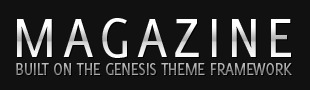
<style>
.page{position:relative;width:310px;height:90px;background:#111111}
.page>*{position:absolute;margin:0}
.t1{font:60px "Delicious-Roman";letter-spacing:0.1em;color:#ebebeb;text-transform:uppercase}
.t2{font:17.6px "Delicious-Roman";letter-spacing:-0.025em;text-transform:uppercase}
</style>
<div class="page">
<p class="t1" style="left:17px;top:18px;width:274px;height:40px">Magazine</p>
<p class="t2" style="left:16px;top:63px;width:276px;height:12px">Built on the Genesis theme framework</p>
</div>
